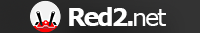
<style>
.page{position:relative;width:200px;height:33px}
.page>*{position:absolute;margin:0}
.t1{font:24px "Verdana-Bold";letter-spacing:-0.1em;color:#ffffff}
.t2{font:24px "Verdana";letter-spacing:-0.1em;color:#ffffff}
</style>
<div class="page">
<p class="t1" style="left:69px;top:7px;width:97px;height:19px">Red2.<span class="t2">net</span></p>
</div>
